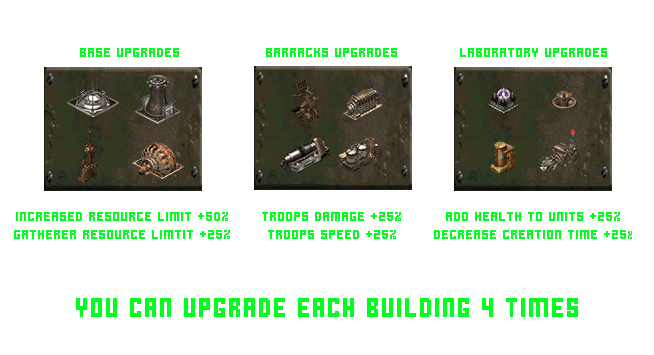
<style>
.page{position:relative;width:654px;height:355px;background:#ffffff}
.page>*{position:absolute;margin:0}
.t1{font:15px "MeatMadness";color:#00ff1e}
.t2{font:12px "MeatMadness";color:#00ff1e}
.t3{font:30px "MeatMadness";color:#00ff1e}
</style>
<div class="page">
<p class="t1" style="left:80px;top:48px;width:99px;height:9px">Base upgrades</p>
<p class="t1" style="left:266px;top:48px;width:131px;height:9px">Barracks upgrades</p>
<p class="t1" style="left:460px;top:48px;width:147px;height:9px">Laboratory upgrades</p>
<p class="t1" style="left:14px;top:212px;width:216px;height:27px;text-align:center">increased resource limit +50% <br>gatherer resource limtit +25%</p>
<p class="t1" style="left:262px;top:212px;width:139px;height:27px;text-align:center">Troops Damage +25%<br>Troops Speed +25%</p>
<p class="t1" style="left:434px;top:212px;width:198px;height:27px;text-align:center">Add health to units +25%<br>Decrease creation time +25<span class="t2">%</span></p>
<p class="t3" style="left:76px;top:298px;width:502px;height:19px">You can upgrade each building 4 times</p>
</div>
